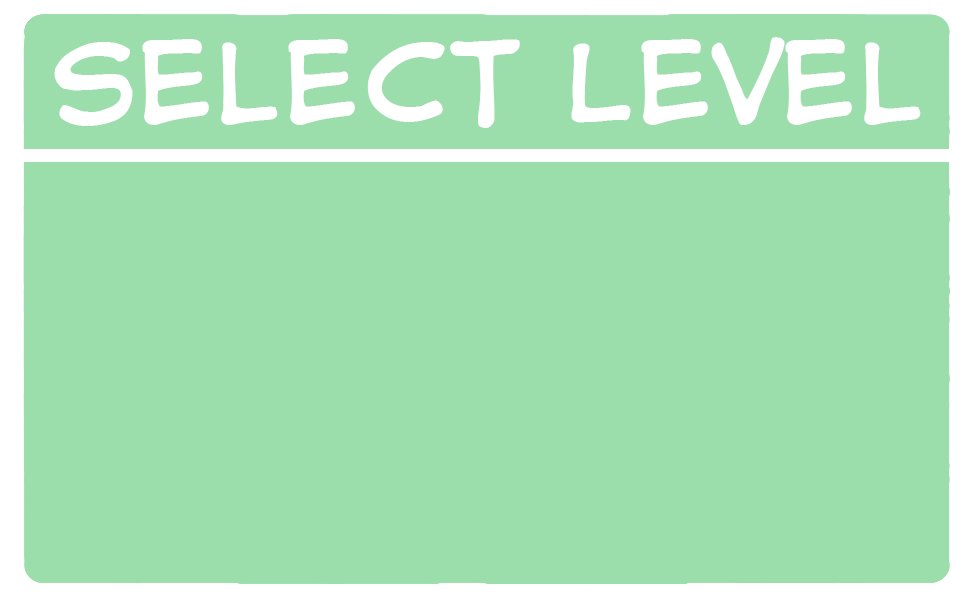
<style>
.page{position:relative;width:975px;height:600px;background:#9bdeac}
.page>*{position:absolute;margin:0}
.t1{font:100px "CCAstroCity";letter-spacing:0.025em;color:#ffffff}
</style>
<div class="page">
<p class="t1" style="left:54px;top:37px;width:867px;height:91px">Select Level</p>
</div>
